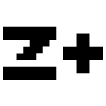
<style>
.page{position:relative;width:106px;height:106px;background:#ffffff}
.page>*{position:absolute;margin:0}
.t1{font:80px "BMarmyA12";color:#000000}
</style>
<div class="page">
<p class="t1" style="left:3px;top:26px;width:100px;height:54px">Z+</p>
</div>
